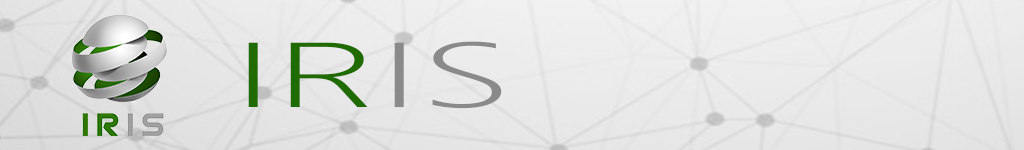
<style>
.page{position:relative;width:1024px;height:150px}
.page>*{position:absolute;margin:0}
.t1{font:85.3px "MicrosoftYaHeiUILight";color:#1f6b00;scale:2.02 1}
.t2{font:85.3px "MicrosoftYaHeiUILight";color:#8b8a8a;scale:2.02 1}
</style>
<div class="page">
<p class="t1" style="left:248px;top:41px;width:254px;height:68px">IR<span class="t2">IS</span></p>
</div>
